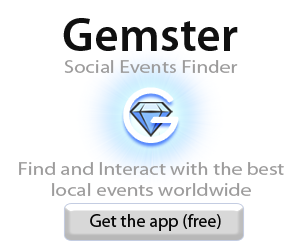
<style>
.page{position:relative;width:300px;height:250px;background:#ffffff}
.page>*{position:absolute;margin:0}
.t1{font:48px "MyriadPro-Semibold";color:#101010}
.t2{font:18px "MyriadPro-Regular";color:#9c9b9b;scale:1.16 1}
.t3{font:72px "BelleroseLight";color:#ffffff}
.t4{font:18px "MyriadPro-Regular";color:#080808}
</style>
<div class="page">
<p class="t1" style="left:63px;top:18px;width:175px;height:33px">Gemster</p>
<p class="t2" style="left:64px;top:60px;width:174px;height:13px">Social Events Finder</p>
<p class="t3" style="left:124px;top:88px;width:54px;height:54px">G</p>
<p class="t2" style="left:19px;top:162px;width:265px;height:34px;text-align:center">Find and Interact with the best<br>local events worldwide</p>
<p class="t4" style="left:90px;top:214px;width:131px;height:17px">Get the app (free)</p>
</div>
